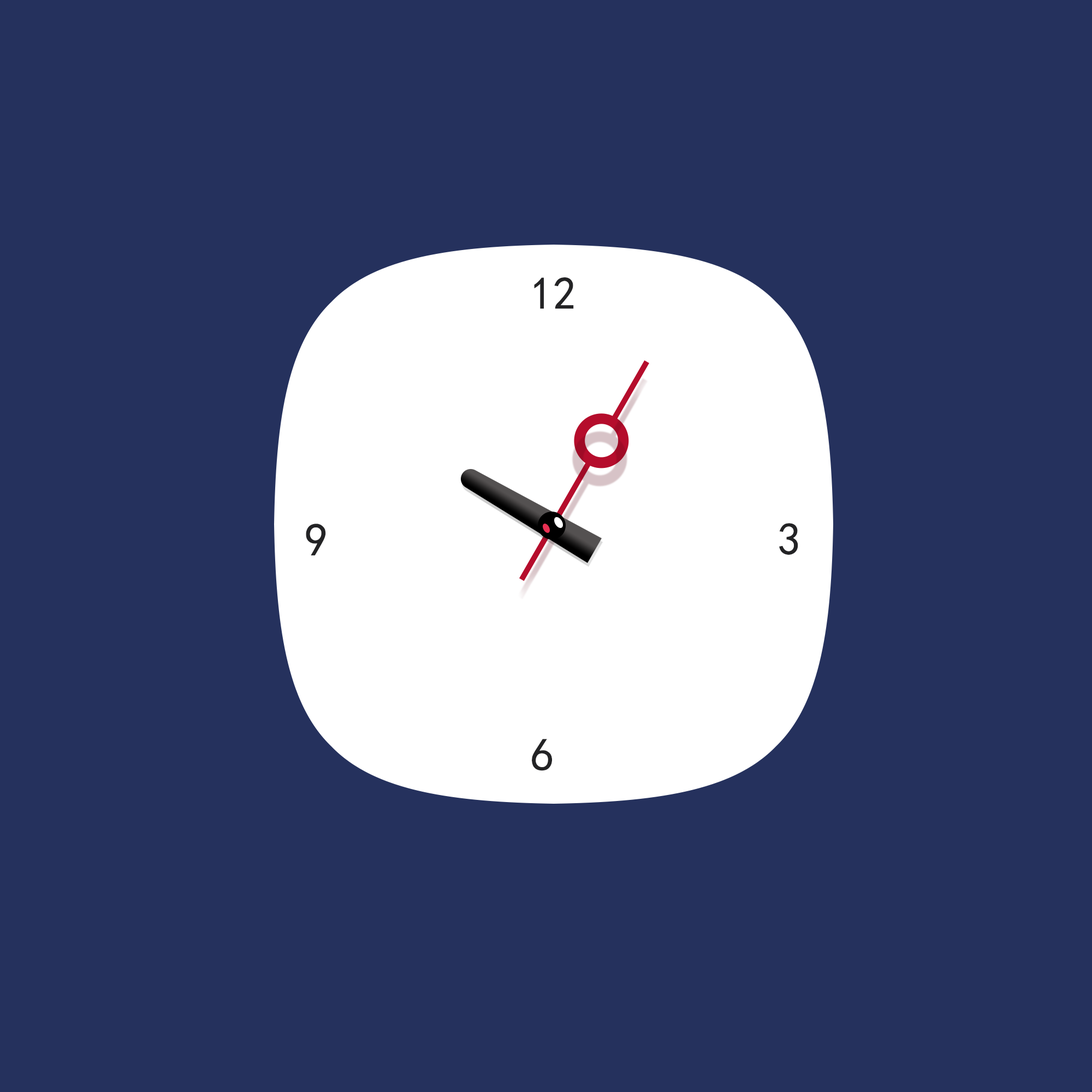
<style>
.page{position:relative;width:1092px;height:1092px;background:#25315d}
.page>*{position:absolute;margin:0}
.t1{font:45.9px "SimHei";color:#232325}
</style>
<div class="page">
<p class="t1" style="left:534px;top:277px;width:40px;height:32px">12</p>
<p class="t1" style="left:306px;top:524px;width:20px;height:32px">9</p>
<p class="t1" style="left:779px;top:523px;width:19px;height:32px">3</p>
<p class="t1" style="left:532px;top:739px;width:20px;height:32px">6</p>
</div>
